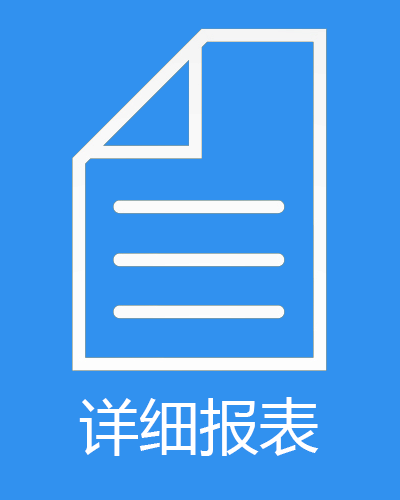
<style>
.page{position:relative;width:400px;height:500px;background:#3191ef}
.page>*{position:absolute;margin:0}
.t1{font:60px "MicrosoftYaHei";color:#ffffff}
</style>
<div class="page">
<p class="t1" style="left:79px;top:397px;width:240px;height:59px">详细报表</p>
</div>
